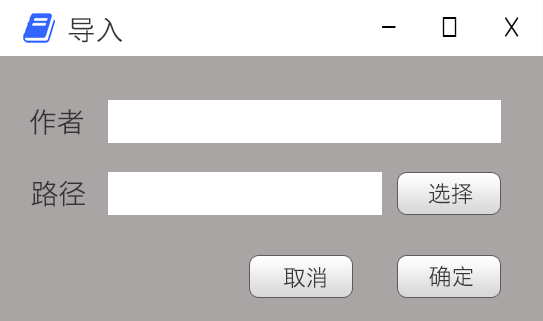
<style>
.page{position:relative;width:543px;height:321px;background:#aaa5a5}
.page>*{position:absolute;margin:0}
.t1{font:27.9px "HiraginoSansGB-W3";color:#333333}
.t2{font:22.9px "HiraginoSansGB-W3";color:#373737}
</style>
<div class="page">
<p class="t1" style="left:68px;top:17px;width:55px;height:26px">导入</p>
<p class="t1" style="left:30px;top:109px;width:53px;height:26px">作者</p>
<p class="t1" style="left:31px;top:180px;width:54px;height:27px">路径</p>
<p class="t2" style="left:428px;top:183px;width:45px;height:22px">选择</p>
<p class="t2" style="left:284px;top:267px;width:42px;height:22px">取消</p>
<p class="t2" style="left:429px;top:266px;width:44px;height:21px">确定</p>
</div>
